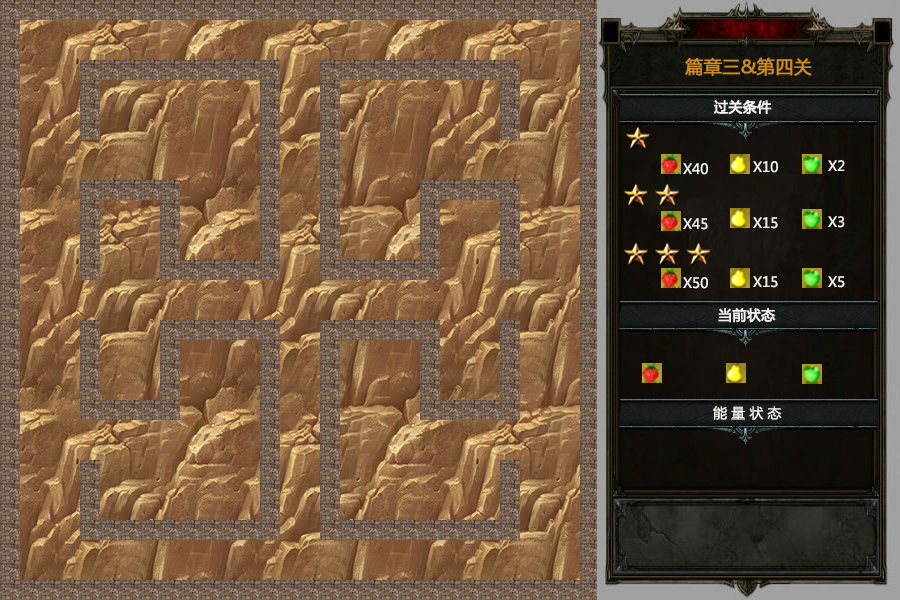
<style>
.page{position:relative;width:900px;height:600px}
.page>*{position:absolute;margin:0}
.t1{font:18px "MicrosoftYaHei";color:#cf8b20;font-weight:bold}
.t2{font:14px "MicrosoftYaHei";color:#f9f3f3;font-weight:bold}
.t3{font:14px "MicrosoftYaHei";color:#f1f0e9}
.t4{font:14px "MicrosoftYaHei";color:#f1f0e9;font-weight:bold}
.t5{font:14px "MicrosoftYaHei";color:#f9f3f3}
</style>
<div class="page">
<p class="t1" style="left:685px;top:57px;width:127px;height:19px">篇章三&amp;第四关</p>
<p class="t2" style="left:714px;top:100px;width:58px;height:15px">过关条件</p>
<p class="t3" style="left:753px;top:161px;width:25px;height:12px">X10</p>
<p class="t3" style="left:828px;top:160px;width:17px;height:11px">X2</p>
<p class="t3" style="left:683px;top:163px;width:25px;height:12px">X40</p>
<p class="t3" style="left:683px;top:218px;width:25px;height:12px">X45</p>
<p class="t3" style="left:753px;top:217px;width:25px;height:12px">X15</p>
<p class="t3" style="left:828px;top:216px;width:17px;height:12px">X3</p>
<p class="t3" style="left:683px;top:277px;width:25px;height:12px">X50</p>
<p class="t3" style="left:753px;top:276px;width:25px;height:12px">X15</p>
<p class="t3" style="left:828px;top:276px;width:17px;height:12px">X5</p>
<p class="t4" style="left:718px;top:308px;width:58px;height:15px">当前状态</p>
<p class="t5" style="left:713px;top:406px;width:69px;height:14px">能 量 状 态</p>
</div>
